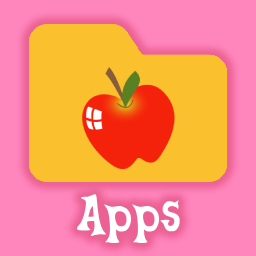
<style>
.page{position:relative;width:256px;height:256px;background:#fbc02d}
.page>*{position:absolute;margin:0}
.t1{font:58.1px "CelestiaReduxAltMedium";color:#ffffff}
</style>
<div class="page">
<p class="t1" style="left:76px;top:194px;width:104px;height:49px">Apps</p>
</div>
